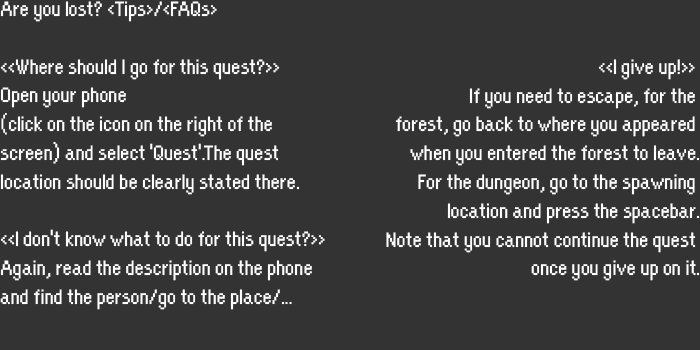
<style>
.page{position:relative;width:700px;height:350px;background:#333333}
.page>*{position:absolute;margin:0}
.t1{font:24px "OrangeKid-Regular";color:#ffffff}
</style>
<div class="page">
<p class="t1" style="left:0px;top:1px;width:325px;height:309px">Are you lost? &lt;Tips&gt;/&lt;FAQs&gt;<br><br>&lt;&lt;Where should I go for this quest?&gt;&gt;<br>Open your phone <br>(click on the icon on the right of the <br>screen) and select 'Quest'.The quest <br>location should be clearly stated there.<br><br>&lt;&lt;I don't know what to do for this quest?&gt;&gt;<br>Again, read the description on the phone <br>and find the person/go to the place/...</p>
<p class="t1" style="left:386px;top:59px;width:314px;height:222px;text-align:right">&lt;&lt;I give up!&gt;&gt; <br>If you need to escape, for the <br>forest, go back to where you appeared <br>when you entered the forest to leave.<br>For the dungeon, go to the spawning <br>location and press the spacebar.<br>Note that you cannot continue the quest <br>once you give up on it.</p>
</div>
